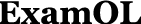
<style>
.page{position:relative;width:141px;height:24px;background:#ffffff}
.page>*{position:absolute;margin:0}
.t1{font:55.8px "Vani-Bold";color:#010101}
</style>
<div class="page">
<p class="t1" style="left:0px;top:0px;width:142px;height:25px">ExamOL</p>
</div>
